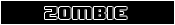
<style>
.page{position:relative;width:175px;height:25px;background:#000000}
.page>*{position:absolute;margin:0}
.t1{font:14px "8BITWONDERNominal";color:#000000}
</style>
<div class="page">
<p class="t1" style="left:45px;top:7px;width:82px;height:12px">Zombie</p>
</div>
